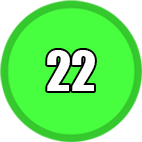
<style>
.page{position:relative;width:142px;height:142px;background:#47ff3e}
.page>*{position:absolute;margin:0}
.t1{font:50px "Impact";color:#ffffff}
</style>
<div class="page">
<p class="t1" style="left:47px;top:50px;width:48px;height:41px">22</p>
</div>
